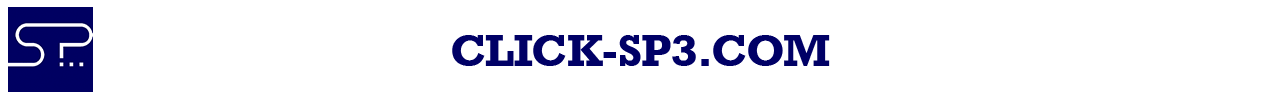
<style>
.page{position:relative;width:1280px;height:100px;background:#ffffff}
.page>*{position:absolute;margin:0}
.t1{font:41.7px "Rockwell-Bold";color:#000066;text-transform:uppercase}
</style>
<div class="page">
<p class="t1" style="left:452px;top:35px;width:378px;height:31px">Click-Sp3.com</p>
</div>
